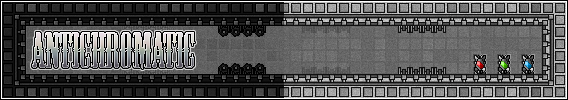
<style>
.page{position:relative;width:568px;height:100px}
.page>*{position:absolute;margin:0}
.t1{font:48px "MesquiteStd"}
</style>
<div class="page">
<p class="t1" style="left:32px;top:32px;width:163px;height:37px">Antichromatic</p>
</div>
